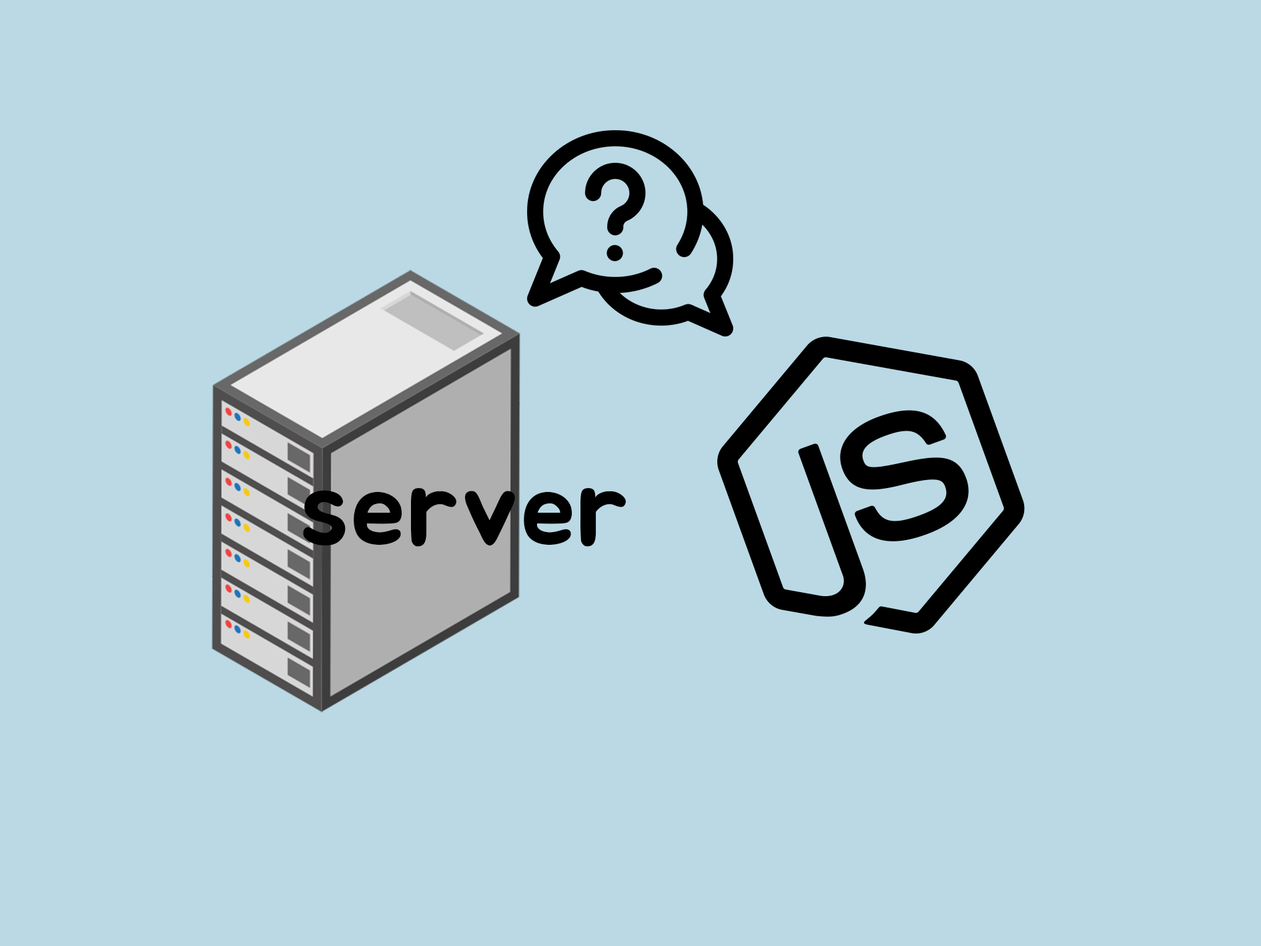
<style>
.page{position:relative;width:1261px;height:946px;background:#bad9e5}
.page>*{position:absolute;margin:0}
.t1{font:113.2px "BMJUAOTF";color:#000000}
</style>
<div class="page">
<p class="t1" style="left:303px;top:488px;width:323px;height:58px">server</p>
</div>
